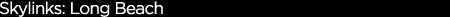
<style>
.page{position:relative;width:450px;height:17px;background:#000000}
.page>*{position:absolute;margin:0}
.t1{font:17px "Gotham-Book";letter-spacing:-0.04em;color:#ffffff}
</style>
<div class="page">
<p class="t1" style="left:0px;top:1px;width:163px;height:16px">Skylinks: Long Beach</p>
</div>
